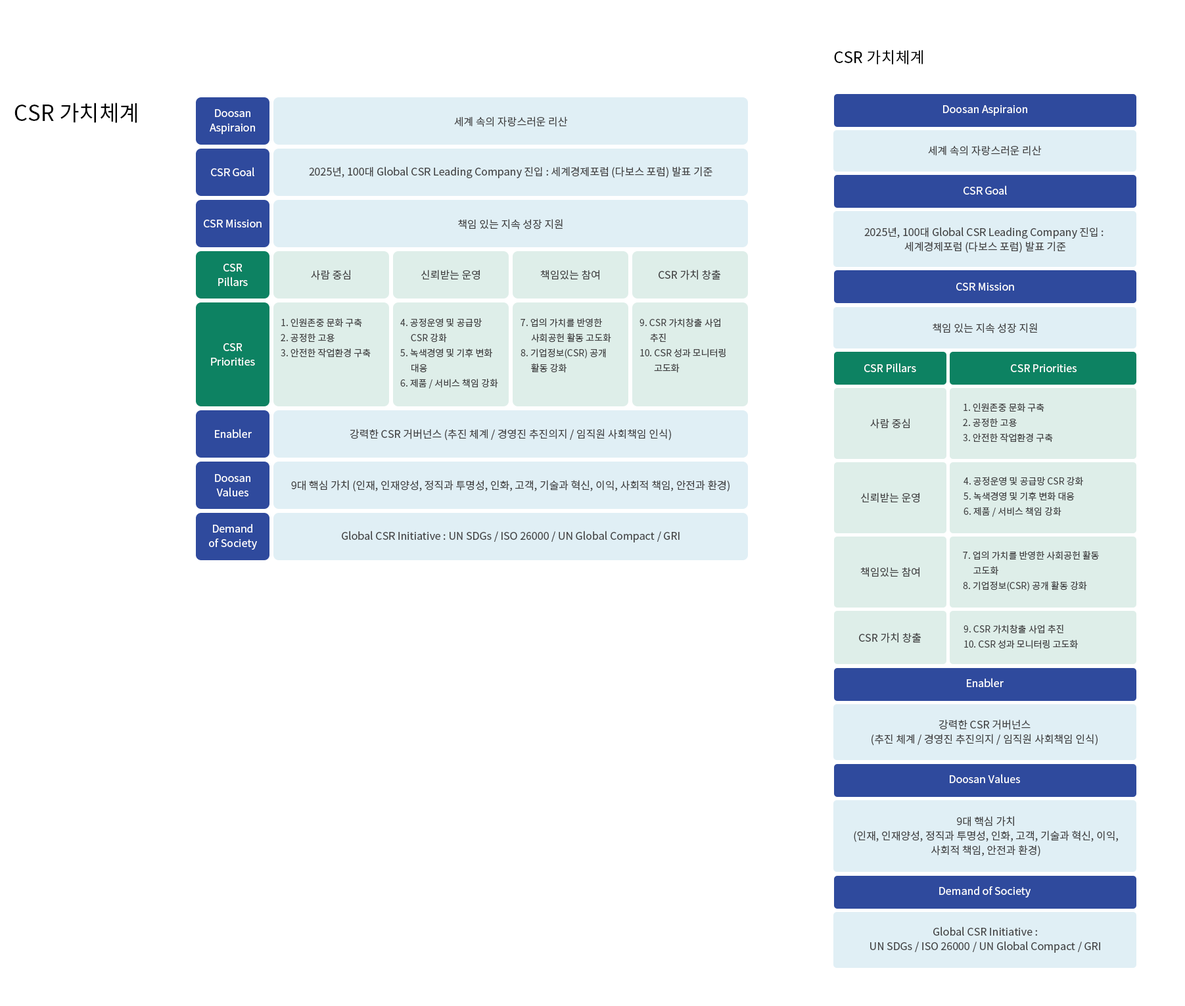
<style>
.page{position:relative;width:1185px;height:1006px;background:#ffffff}
.page>*{position:absolute;margin:0}
.t1{font:15.8px "NotoSansKR-Regular";color:#000000}
.t2{font:21.7px "NotoSansKR-Regular";color:#000000}
.t3{font:10.5px/14.5px "NotoSansKR-Regular";color:#ffffff}
.t4{font:10.5px "NotoSansKR-Regular";color:#ffffff}
.t5{font:10.5px "NotoSansKR-Regular";color:#434344}
.t6{font:10.5px/14.5px "NotoSansKR-Regular";color:#434344}
.t7{font:9.2px/15.1px "NotoSansKR-Regular";color:#434344}
</style>
<div class="page">
<p class="t1" style="left:834px;top:50px;width:89px;height:14px">CSR 가치체계</p>
<p class="t2" style="left:14px;top:103px;width:123px;height:20px">CSR 가치체계</p>
<p class="t3" style="left:210px;top:109px;width:45px;height:25px;text-align:center">Doosan<br>Aspiraion</p>
<p class="t4" style="left:943px;top:105px;width:85px;height:11px">Doosan Aspiraion</p>
<p class="t5" style="left:454px;top:116px;width:114px;height:11px">세계 속의 자랑스러운 리산</p>
<p class="t5" style="left:928px;top:145px;width:114px;height:11px">세계 속의 자랑스러운 리산</p>
<p class="t4" style="left:211px;top:167px;width:43px;height:9px">CSR Goal</p>
<p class="t5" style="left:309px;top:166px;width:404px;height:12px">2025년, 100대 Global CSR Leading Company 진입 : 세계경제포럼 (다보스 포럼) 발표 기준</p>
<p class="t4" style="left:964px;top:185px;width:43px;height:10px">CSR Goal</p>
<p class="t4" style="left:204px;top:219px;width:58px;height:8px">CSR Mission</p>
<p class="t5" style="left:458px;top:219px;width:105px;height:10px">책임 있는 지속 성장 지원</p>
<p class="t6" style="left:865px;top:227px;width:239px;height:26px;text-align:center">2025년, 100대 Global CSR Leading Company 진입 : <br>세계경제포럼 (다보스 포럼) 발표 기준</p>
<p class="t3" style="left:218px;top:264px;width:30px;height:22px;text-align:center">CSR<br>Pillars</p>
<p class="t5" style="left:311px;top:270px;width:39px;height:10px">사람 중심</p>
<p class="t5" style="left:421px;top:270px;width:59px;height:10px">신뢰받는 운영</p>
<p class="t5" style="left:540px;top:270px;width:60px;height:10px">책임있는 참여</p>
<p class="t5" style="left:659px;top:270px;width:62px;height:10px">CSR 가치 창출</p>
<p class="t4" style="left:957px;top:282px;width:57px;height:9px">CSR Mission</p>
<p class="t7" style="left:281px;top:318px;width:90px;height:40px">1. 인원존중 문화 구축<br>2. 공정한 고용<br>3. 안전한 작업환경 구축</p>
<p class="t7" style="left:400px;top:318px;width:98px;height:71px">4. 공정운영 및 공급망<br>     CSR 강화<br>5. 녹색경영 및 기후 변화<br>     대응<br>6. 제품 / 서비스 책임 강화</p>
<p class="t7" style="left:521px;top:318px;width:90px;height:55px">7. 업의 가치를 반영한<br>     사회공헌 활동 고도화<br>8. 기업정보(CSR) 공개<br>     활동 강화</p>
<p class="t7" style="left:640px;top:318px;width:86px;height:55px">9. CSR 가치창출 사업<br>     추진<br>10. CSR 성과 모니터링<br>       고도화</p>
<p class="t5" style="left:933px;top:323px;width:104px;height:10px">책임 있는 지속 성장 지원</p>
<p class="t3" style="left:211px;top:343px;width:44px;height:23px;text-align:center">CSR<br>Priorities</p>
<p class="t4" style="left:865px;top:363px;width:52px;height:9px">CSR Pillars</p>
<p class="t4" style="left:1011px;top:364px;width:66px;height:8px">CSR Priorities</p>
<p class="t7" style="left:963px;top:403px;width:90px;height:39px">1. 인원존중 문화 구축<br>2. 공정한 고용<br>3. 안전한 작업환경 구축</p>
<p class="t5" style="left:870px;top:418px;width:40px;height:11px">사람 중심</p>
<p class="t4" style="left:215px;top:429px;width:37px;height:9px">Enabler</p>
<p class="t5" style="left:350px;top:429px;width:321px;height:12px">강력한 CSR 거버넌스 (추진 체계 / 경영진 추진의지 / 임직원 사회책임 인식)</p>
<p class="t3" style="left:215px;top:474px;width:35px;height:22px;text-align:center">Doosan<br>Values</p>
<p class="t5" style="left:291px;top:480px;width:439px;height:12px">9대 핵심 가치 (인재, 인재양성, 정직과 투명성, 인화, 고객, 기술과 혁신, 이익, 사회적 책임, 안전과 환경)</p>
<p class="t7" style="left:964px;top:477px;width:120px;height:40px">4. 공정운영 및 공급망 CSR 강화<br>5. 녹색경영 및 기후 변화 대응<br>6. 제품 / 서비스 책임 강화</p>
<p class="t5" style="left:861px;top:492px;width:59px;height:11px">신뢰받는 운영</p>
<p class="t3" style="left:209px;top:524px;width:48px;height:26px;text-align:center">Demand<br>of Society</p>
<p class="t5" style="left:342px;top:531px;width:338px;height:11px">Global CSR Initiative : UN SDGs / ISO 26000 / UN Global Compact / GRI</p>
<p class="t7" style="left:963px;top:550px;width:136px;height:41px">7. 업의 가치를 반영한 사회공헌 활동<br>     고도화<br>8. 기업정보(CSR) 공개 활동 강화</p>
<p class="t5" style="left:861px;top:567px;width:59px;height:10px">책임있는 참여</p>
<p class="t7" style="left:964px;top:625px;width:114px;height:24px">9. CSR 가치창출 사업 추진<br>10. CSR 성과 모니터링 고도화</p>
<p class="t5" style="left:859px;top:632px;width:63px;height:11px">CSR 가치 창출</p>
<p class="t4" style="left:967px;top:678px;width:37px;height:9px">Enabler</p>
<p class="t6" style="left:872px;top:719px;width:226px;height:27px;text-align:center">강력한 CSR 거버넌스<br>(추진 체계 / 경영진 추진의지 / 임직원 사회책임 인식)</p>
<p class="t4" style="left:950px;top:774px;width:70px;height:9px">Doosan Values</p>
<p class="t6" style="left:854px;top:816px;width:264px;height:41px;text-align:center">9대 핵심 가치<br>(인재, 인재양성, 정직과 투명성, 인화, 고객, 기술과 혁신, 이익,<br>사회적 책임, 안전과 환경)</p>
<p class="t4" style="left:940px;top:886px;width:91px;height:11px">Demand of Society</p>
<p class="t6" style="left:870px;top:926px;width:231px;height:27px;text-align:center">Global CSR Initiative :<br>UN SDGs / ISO 26000 / UN Global Compact / GRI</p>
</div>
